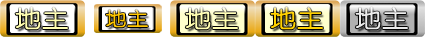
<style>
.page{position:relative;width:425px;height:37px}
.page>*{position:absolute;margin:0}
.t1{font:23.3px "YouYuan";color:#fffeb0;font-weight:bold;scale:1.14 1}
.t2{font:18.6px "YouYuan";color:#ffc600;font-weight:bold;scale:1.14 1}
.t3{font:23.3px "YouYuan";color:#ffd100;font-weight:bold;scale:1.14 1}
.t4{font:23.3px "YouYuan";color:#eaeaea;font-weight:bold;scale:1.14 1}
</style>
<div class="page">
<p class="t1" style="left:15px;top:7px;width:53px;height:23px">地主</p>
<p class="t2" style="left:106px;top:9px;width:42px;height:19px">地主</p>
<p class="t1" style="left:185px;top:7px;width:53px;height:23px">地主</p>
<p class="t3" style="left:270px;top:7px;width:53px;height:23px">地主</p>
<p class="t4" style="left:355px;top:7px;width:53px;height:23px">地主</p>
</div>
